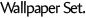
<style>
.page{position:relative;width:86px;height:18px;background:#ffffff}
.page>*{position:absolute;margin:0}
.t1{font:16px "Amira-Roman";letter-spacing:-0.05em;color:#000000}
</style>
<div class="page">
<p class="t1" style="left:0px;top:1px;width:85px;height:16px;opacity:0.96">Wallpaper Set.</p>
</div>
